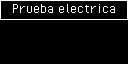
<style>
.page{position:relative;width:128px;height:64px;background:#000000}
.page>*{position:absolute;margin:0}
.t1{font:16px "PixelOperator";color:#ffffff}
</style>
<div class="page">
<p class="t1" style="left:13px;top:4px;width:102px;height:9px">Prueba electrica</p>
</div>
